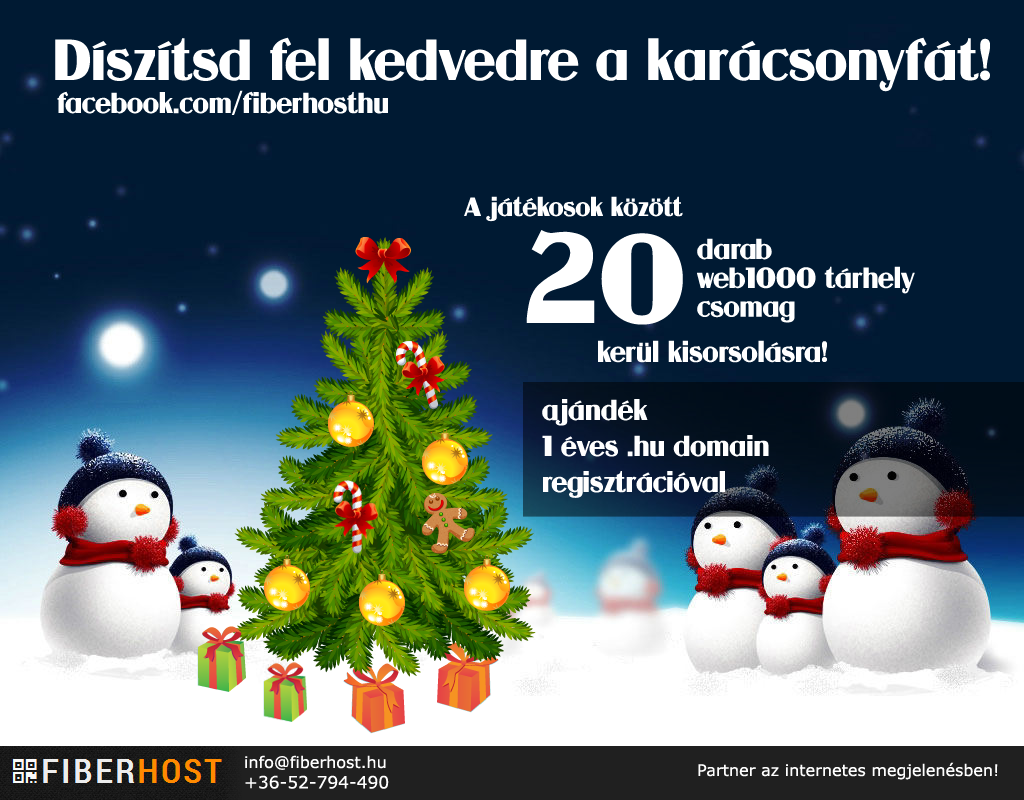
<style>
.page{position:relative;width:1024px;height:800px;background:#001a33}
.page>*{position:absolute;margin:0}
.t1{font:48px "Guanine";color:#ffffff}
.t2{font:24px "Guanine";color:#ffffff}
.t3{font:22px "Guanine";color:#ffffff}
.t4{font:105px "Guanine";color:#ffffff}
.t5{font:24px/36px "Guanine";color:#ffffff}
.t6{font:16px "Verdana";color:#ffffff}
.t7{font:17px "Verdana";color:#ffffff}
</style>
<div class="page">
<p class="t1" style="left:55px;top:37px;width:935px;height:55px">Díszítsd fel kedvedre a karácsonyfát!</p>
<p class="t2" style="left:57px;top:90px;width:331px;height:25px">facebook.com/fiberhosthu</p>
<p class="t3" style="left:464px;top:196px;width:219px;height:26px">A játékosok között</p>
<p class="t4" style="left:526px;top:230px;width:157px;height:95px">20</p>
<p class="t2" style="left:697px;top:238px;width:218px;height:85px">darab<br>web1000 tárhely <br>csomag</p>
<p class="t2" style="left:598px;top:340px;width:229px;height:23px"><span class="t3"><br></span>kerül kisorsolásra!</p>
<p class="t5" style="left:542px;top:399px;width:227px;height:99px">ajándék <br>1 éves .hu domain <br>regisztrációval</p>
<p class="t6" style="left:245px;top:755px;width:144px;height:34px">info@fiberhost.hu<br><span class="t7">+36-52-794-490</span></p>
<p class="t6" style="left:698px;top:762px;width:300px;height:18px">Partner az internetes megjelenésben!</p>
</div>
